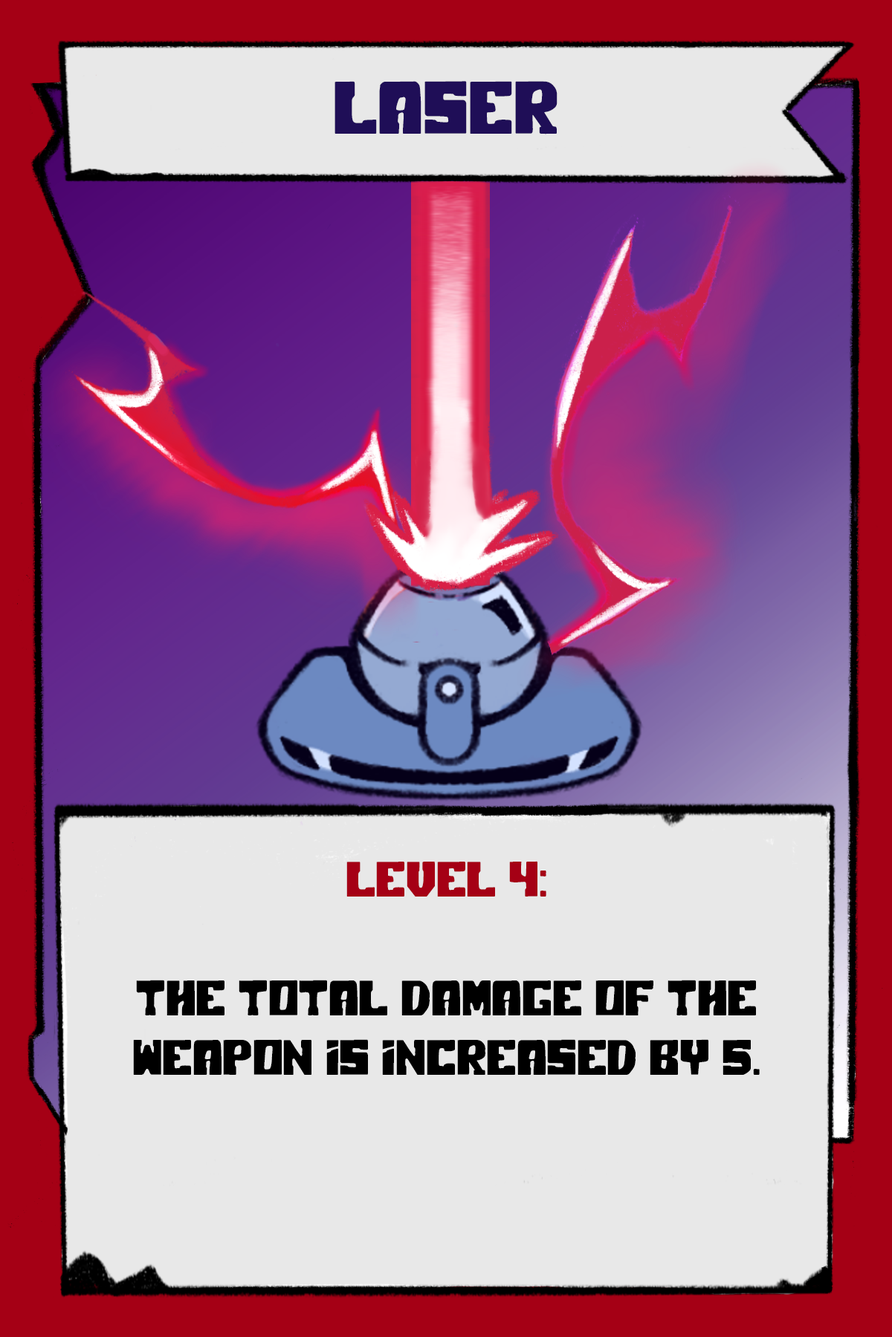
<style>
.page{position:relative;width:892px;height:1337px;background:#e8e8e8}
.page>*{position:absolute;margin:0}
.t1{font:74.3px "PolarPress";color:#1f0e57}
.t2{font:49.5px "PolarPress";color:#000000}
.t3{font:49.5px "PolarPress";color:#a50015}
</style>
<div class="page">
<p class="t1" style="left:334px;top:81px;width:223px;height:53px">LASER</p>
<p class="t2" style="left:133px;top:861px;width:626px;height:214px;text-align:center"><span class="t3">LEVEL 4:<br><br></span>The total damage of the weapon is increased by 5.</p>
</div>
